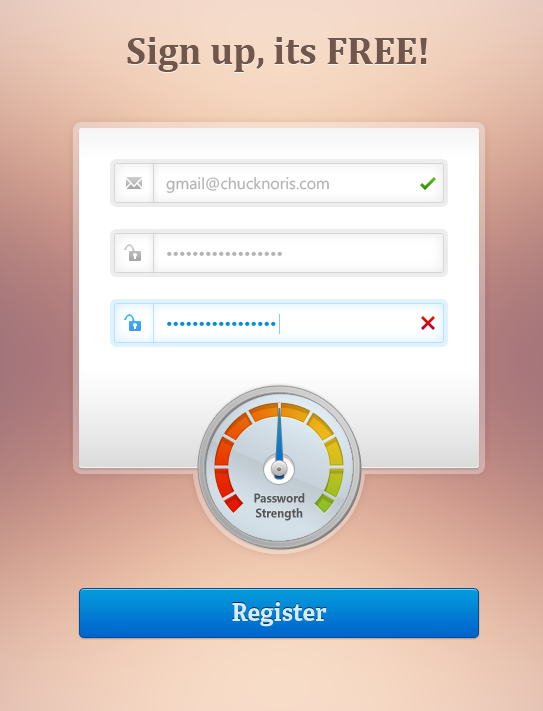
<style>
.page{position:relative;width:543px;height:711px}
.page>*{position:absolute;margin:0}
.t1{font:38.7px "Cambria-Bold";color:#71564b}
.t2{font:16px "SegoeWP";color:#b3b3b3}
.t3{font:16px "SegoeWP";color:#038cd7}
.t4{font:12.5px "SegoeUI-Bold";color:#575757;scale:0.93 1}
.t5{font:24px "AdelleBasic-Bold";color:#d3ebff}
</style>
<div class="page">
<p class="t1" style="left:127px;top:37px;width:300px;height:35px">Sign up, its FREE!</p>
<p class="t2" style="left:166px;top:177px;width:163px;height:16px">gmail@chucknoris.com</p>
<p class="t2" style="left:167px;top:251px;width:115px;height:5px">••••••••••••••••••</p>
<p class="t3" style="left:167px;top:321px;width:109px;height:5px">•••••••••••••••••</p>
<p class="t4" style="left:254px;top:493px;width:51px;height:28px;text-align:center">Password<br>Strength</p>
<p class="t5" style="left:232px;top:602px;width:95px;height:25px">Register</p>
</div>
